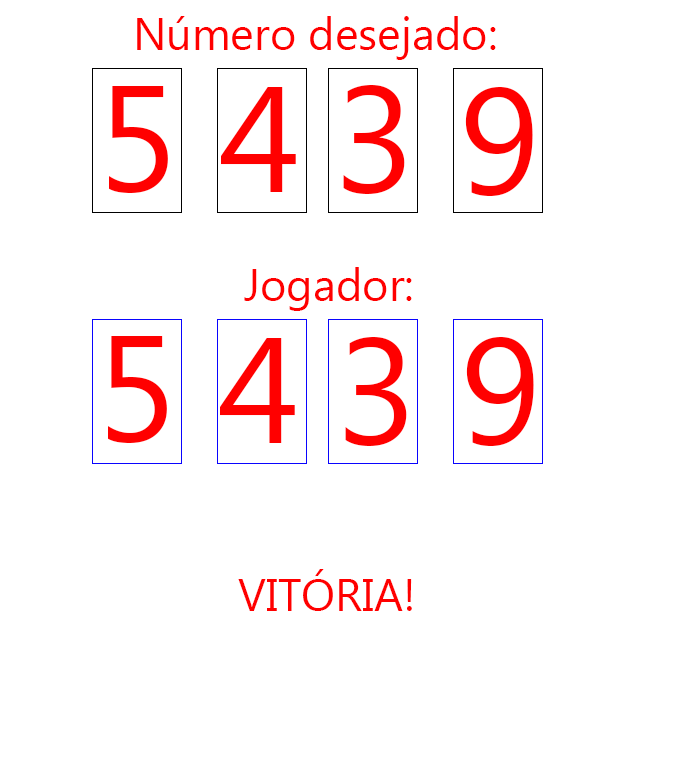
<style>
.page{position:relative;width:676px;height:783px;background:#ffffff}
.page>*{position:absolute;margin:0}
.t1{font:45px "MicrosoftTaiLe";color:#ff0000}
.t2{font:150px "MicrosoftTaiLe";color:#ff0000}
</style>
<div class="page">
<p class="t1" style="left:137px;top:16px;width:359px;height:44px">Número desejado:</p>
<p class="t2" style="left:109px;top:86px;width:59px;height:107px">5</p>
<p class="t2" style="left:221px;top:87px;width:75px;height:105px">4</p>
<p class="t2" style="left:343px;top:85px;width:62px;height:109px">3</p>
<p class="t2" style="left:465px;top:87px;width:68px;height:109px">9</p>
<p class="t1" style="left:244px;top:267px;width:168px;height:44px">Jogador:</p>
<p class="t2" style="left:108px;top:336px;width:59px;height:107px">5</p>
<p class="t2" style="left:220px;top:338px;width:75px;height:105px">4</p>
<p class="t2" style="left:345px;top:337px;width:62px;height:109px">3</p>
<p class="t2" style="left:466px;top:337px;width:68px;height:109px">9</p>
<p class="t1" style="left:238px;top:569px;width:174px;height:42px">VITÓRIA!</p>
</div>
